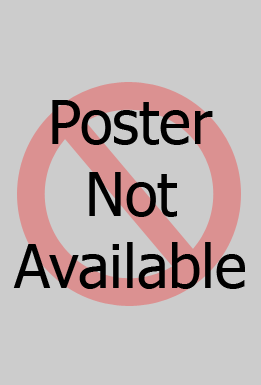
<style>
.page{position:relative;width:261px;height:385px;background:#cccccc}
.page>*{position:absolute;margin:0}
.t1{font:60px "Tahoma";color:#000000}
</style>
<div class="page">
<p class="t1" style="left:13px;top:100px;width:232px;height:189px;text-align:center">Poster<br>Not<br>Available</p>
</div>
